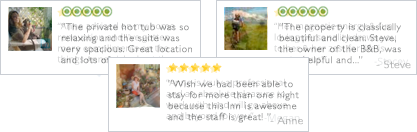
<style>
.page{position:relative;width:417px;height:132px;background:#ffffff}
.page>*{position:absolute;margin:0}
.t1{font:9.9px/11px "GillSans-Light";letter-spacing:0.025em;color:#8c8d8d;font-weight:bold;scale:1.04 1}
.t2{font:9.9px/11px "GillSans-Light";letter-spacing:0.025em;color:#838585;font-weight:bold;scale:1.04 1}
.t3{font:10.7px "GillSans-Light";letter-spacing:0.025em;color:#bfbfbf;font-weight:bold;scale:1.05 1}
.t4{font:10.7px "GillSans-Light";letter-spacing:0.025em;color:#b9b9ba;font-weight:bold;scale:1.05 1}
</style>
<div class="page">
<p class="t1" style="left:61px;top:23px;width:131px;height:41px">“The private hot tub was so <br>relaxing and the suite was <br>very spacious. Great location <br>and lots of...</p>
<p class="t2" style="left:278px;top:23px;width:123px;height:43px">“The property is classically <br>beautiful and clean. Steve, <br>the owner of the B&amp;B, was <br>very helpful and...”</p>
<p class="t3" style="left:376px;top:60px;width:35px;height:9px">- Steve</p>
<p class="t1" style="left:168px;top:80px;width:131px;height:43px">“Wish we had been able to <br>stay for more than one night <br>because this Inn is awesome <br>and the staff is great! ”</p>
<p class="t4" style="left:270px;top:116px;width:33px;height:9px">- Anne</p>
</div>
